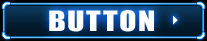
<style>
.page{position:relative;width:207px;height:41px}
.page>*{position:absolute;margin:0}
.t1{font:26.1px "Impact";letter-spacing:0.05em;color:#ffffff;text-transform:uppercase;scale:1.23 1}
</style>
<div class="page">
<p class="t1" style="left:49px;top:10px;width:105px;height:22px">Button</p>
</div>
